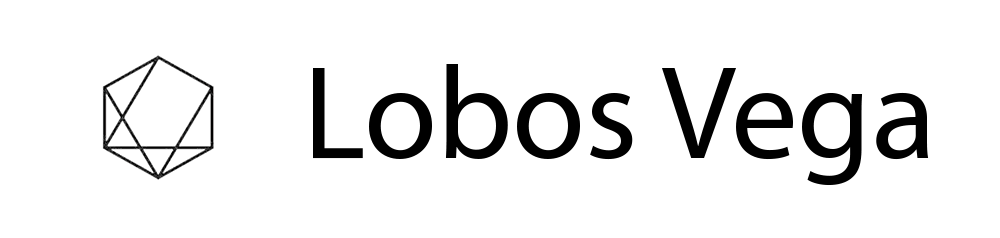
<style>
.page{position:relative;width:1000px;height:238px;background:#ffffff}
.page>*{position:absolute;margin:0}
.t1{font:132.9px "MyriadPro-Regular";color:#000000}
</style>
<div class="page">
<p class="t1" style="left:313px;top:64px;width:616px;height:122px">Lobos Vega</p>
</div>
